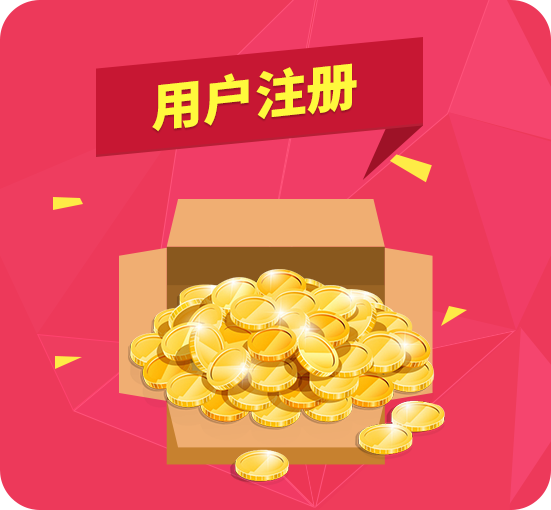
<style>
.page{position:relative;width:551px;height:510px;background:#ed395a}
.page>*{position:absolute;margin:0}
.t1{font:51.7px "SourceHanSansCN-Heavy";color:#fff93c}
</style>
<div class="page">
<p class="t1" style="left:152px;top:63px;width:205px;height:69px;rotate:-6deg">用户注册</p>
</div>
